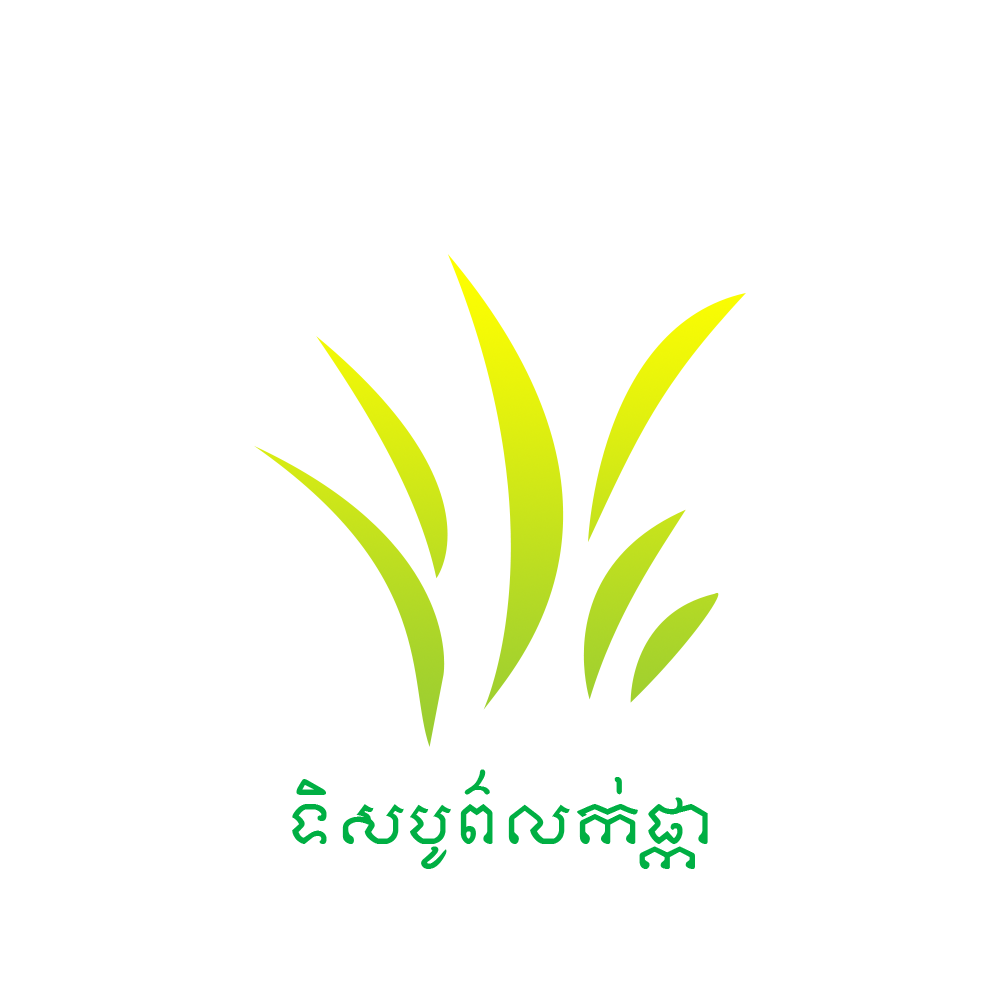
<style>
.page{position:relative;width:1000px;height:1000px;background:#ffffff}
.page>*{position:absolute;margin:0}
.t1{font:54px "Moulpali-Regular";color:#00af43}
</style>
<div class="page">
<p class="t1" style="left:292px;top:769px;width:416px;height:100px;text-align:right">ទិសបូព៌លក់ផ្កា</p>
</div>
